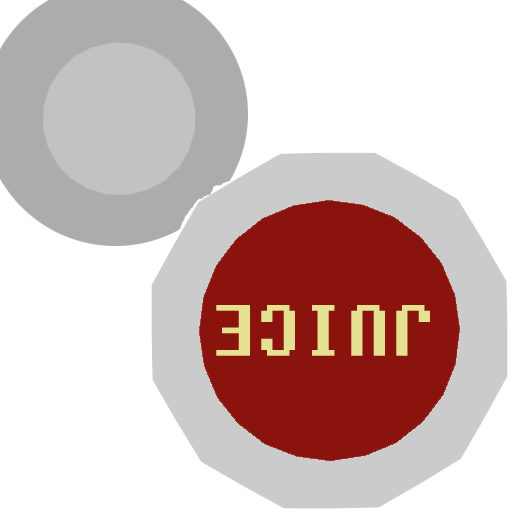
<style>
.page{position:relative;width:512px;height:512px;background:#ffffff}
.page>*{position:absolute;margin:0}
.t1{font:72px "Fixedsys";color:#e6e091}
</style>
<div class="page">
<p class="t1" style="left:216px;top:305px;width:214px;height:51px;rotate:-180deg">JUICE</p>
</div>
